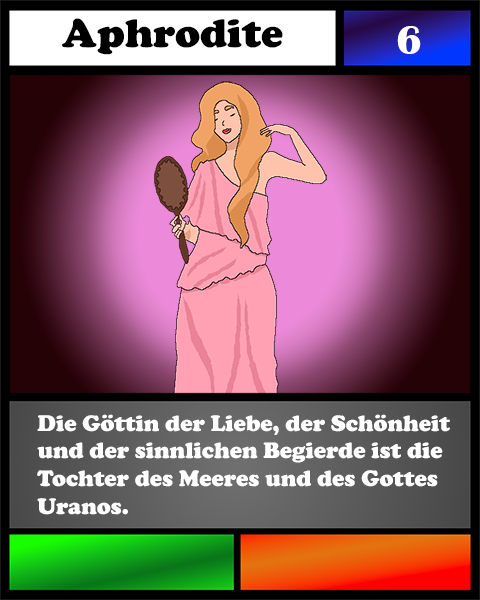
<style>
.page{position:relative;width:480px;height:600px}
.page>*{position:absolute;margin:0}
.t1{font:41.7px "CooperBlack";color:#000000}
.t2{font:41.7px "BritannicBold";color:#ffffff}
.t3{font:23.1px "CooperBlack";color:#ffffff}
</style>
<div class="page">
<p class="t1" style="left:62px;top:18px;width:221px;height:37px">Aphrodite</p>
<p class="t2" style="left:397px;top:26px;width:24px;height:28px">6</p>
<p class="t3" style="left:37px;top:414px;width:413px;height:101px">Die Göttin der Liebe, der Schönheit <br>und der sinnlichen Begierde ist die Tochter des Meeres und des Gottes Uranos.</p>
</div>
